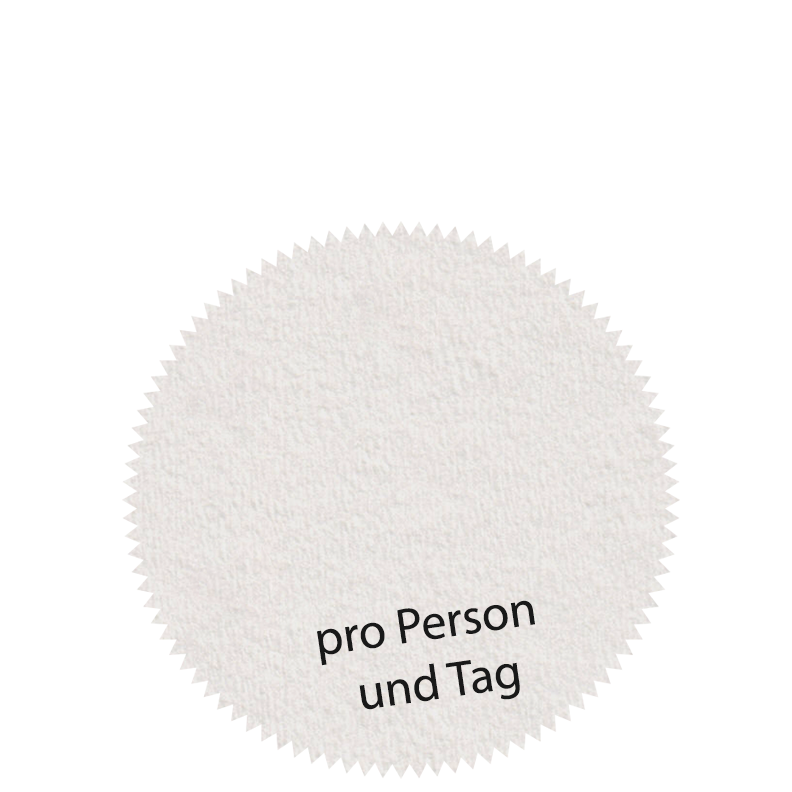
<style>
.page{position:relative;width:792px;height:792px;background:#ffffff}
.page>*{position:absolute;margin:0}
.t1{font:49.9px "MyriadPro-Regular";color:#191919}
</style>
<div class="page">
<p class="t1" style="left:317px;top:600px;width:218px;height:110px;text-align:center;rotate:-8deg">pro Person <br>und Tag</p>
</div>
